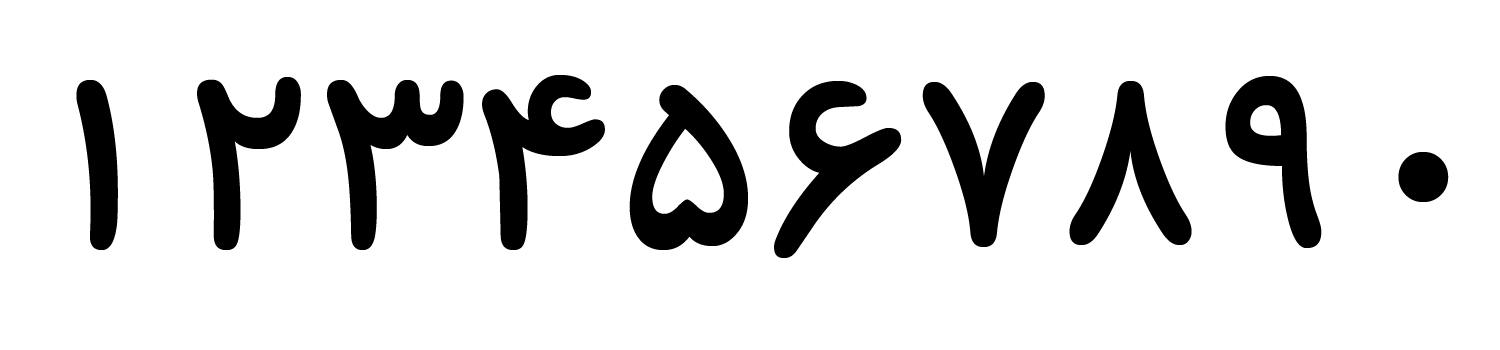
<style>
.page{position:relative;width:1500px;height:350px;background:#ffffff}
.page>*{position:absolute;margin:0}
.t1{font:270px "BKoodakBold";color:#000000}
</style>
<div class="page">
<p class="t1" style="left:76px;top:75px;width:1373px;height:183px">1234567890</p>
</div>
